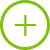
<style>
.page{position:relative;width:50px;height:50px;background:#ffffff}
.page>*{position:absolute;margin:0}
.t1{font:36px "MuchoSansW01-Regular";color:#82be0f}
</style>
<div class="page">
<p class="t1" style="left:14px;top:15px;width:22px;height:21px">+</p>
</div>
